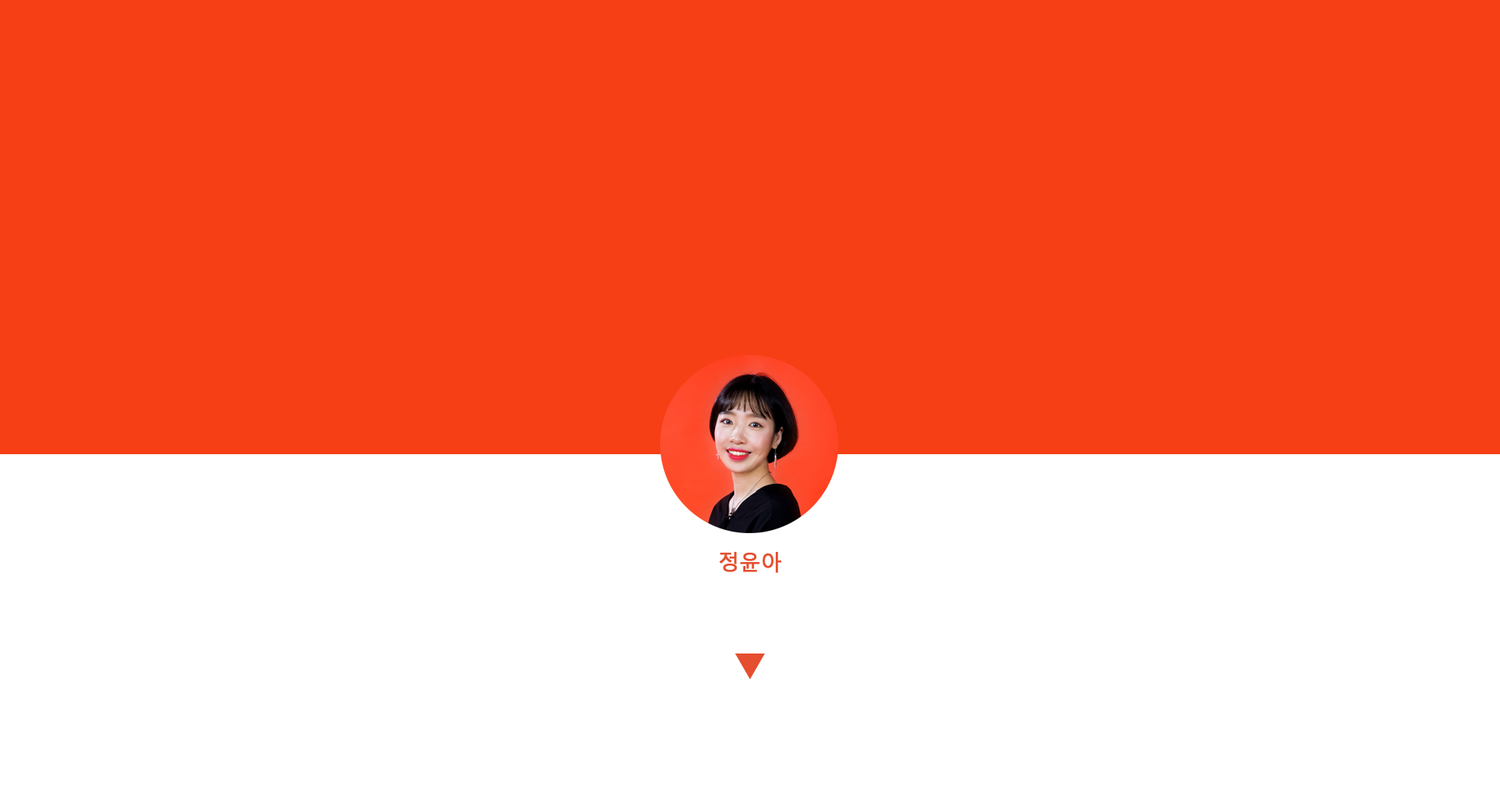
<style>
.page{position:relative;width:1500px;height:795px;background:#f63f14}
.page>*{position:absolute;margin:0}
.t1{font:20.8px "MalgunGothic";color:#e54e2f;font-weight:bold}
</style>
<div class="page">
<p class="t1" style="left:720px;top:552px;width:62px;height:21px">정윤아</p>
</div>
